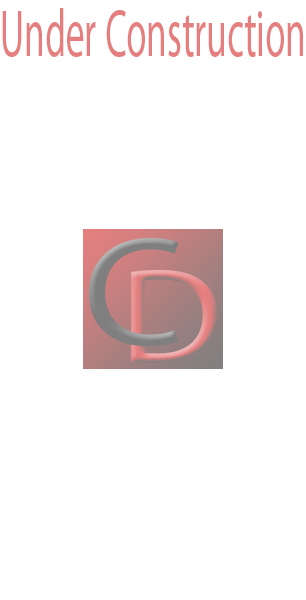
<style>
.page{position:relative;width:306px;height:600px;background:#ffffff}
.page>*{position:absolute;margin:0}
.t1{font:67.3px "MyriadPro-Regular";color:#e57f7f;scale:0.55 1}
</style>
<div class="page">
<p class="t1" style="left:2px;top:8px;width:301px;height:49px">Under Construction</p>
</div>
